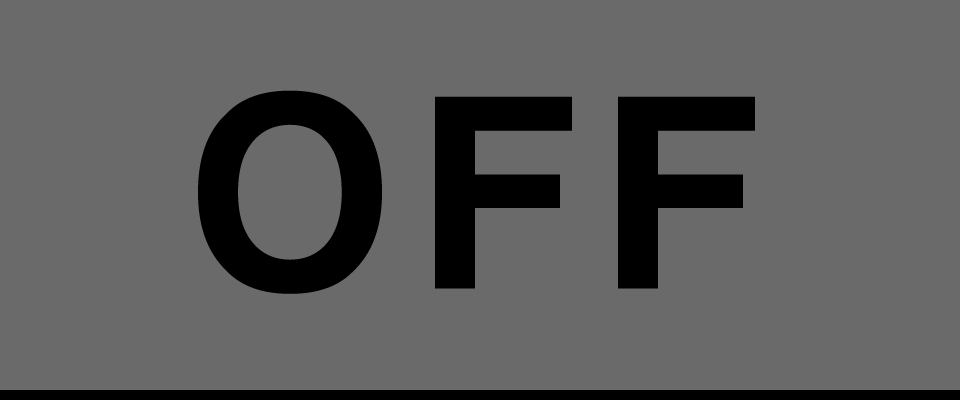
<style>
.page{position:relative;width:960px;height:400px;background:#6a6a6a}
.page>*{position:absolute;margin:0}
.t1{font:266.4px "Helvetica-Bold";letter-spacing:0.1em;color:#000000}
</style>
<div class="page">
<p class="t1" style="left:198px;top:90px;width:557px;height:204px">OFF</p>
</div>
